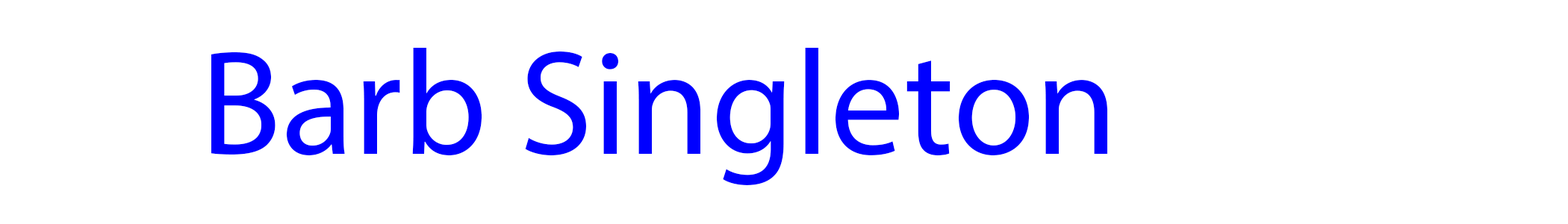
<style>
.page{position:relative;width:1568px;height:224px;background:#ffffff}
.page>*{position:absolute;margin:0}
.t1{font:149.3px "MyriadPro-Regular";color:#0000ff}
</style>
<div class="page">
<p class="t1" style="left:211px;top:48px;width:896px;height:137px">Barb Singleton</p>
</div>
